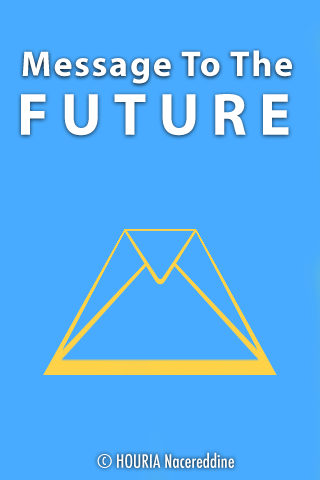
<style>
.page{position:relative;width:320px;height:480px;background:#48abff}
.page>*{position:absolute;margin:0}
.t1{font:36px "MyriadPro-Bold";letter-spacing:0.05em;color:#ffffff}
.t2{font:60px "MyriadPro-Bold";letter-spacing:0.2em;color:#ffffff}
.t3{font:18px "Futura-CondensedMedium";color:#ffffff}
</style>
<div class="page">
<p class="t1" style="left:22px;top:50px;width:270px;height:34px">Message To The</p>
<p class="t2" style="left:21px;top:94px;width:268px;height:42px">FUTURE</p>
<p class="t3" style="left:97px;top:452px;width:137px;height:16px">© HOURIA Nacereddine</p>
</div>
